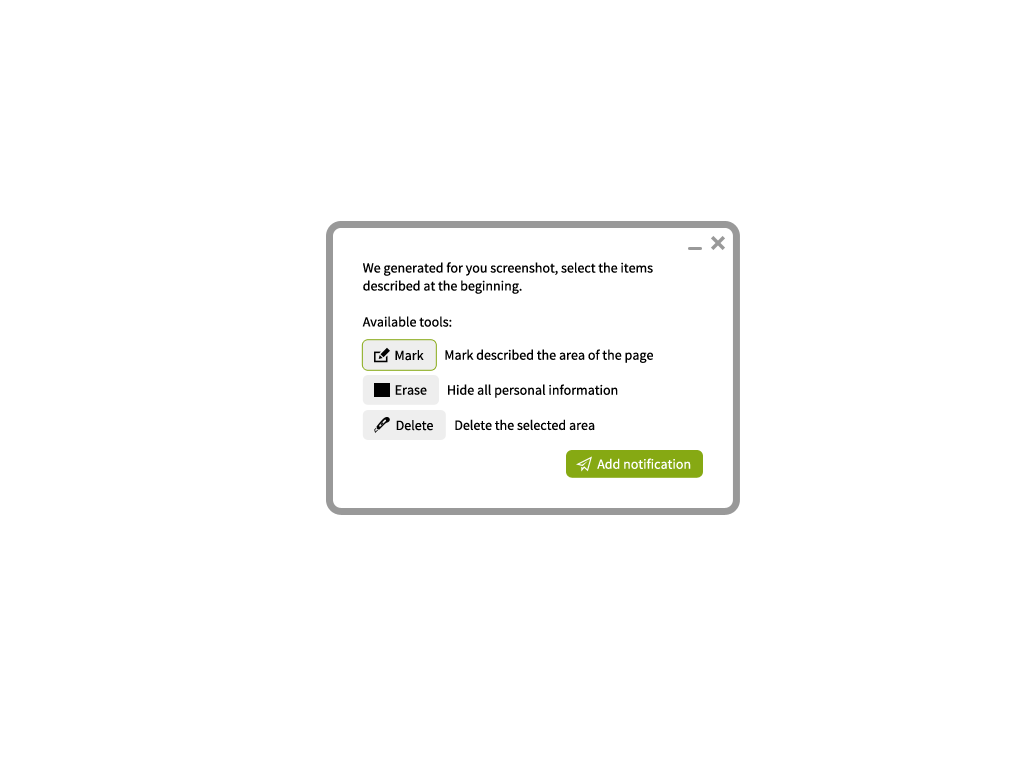
<style>
.page{position:relative;width:1024px;height:768px;background:#ffffff}
.page>*{position:absolute;margin:0}
.t1{font:14px/18px "SourceSansPro-Regular";color:#000000}
.t2{font:14px "SourceSansPro-Regular";color:#000000}
.t3{font:14px "SourceSansPro-Regular";color:#ffffff}
</style>
<div class="page">
<p class="t1" style="left:362px;top:262px;width:291px;height:65px;text-align:justify">We generated for you screenshot, select the items <br>described at the beginning.<br><br>Available tools:</p>
<p class="t2" style="left:395px;top:350px;width:29px;height:11px">Mark</p>
<p class="t2" style="left:395px;top:350px;width:29px;height:11px">Mark</p>
<p class="t2" style="left:445px;top:349px;width:208px;height:14px">Mark described the area of ​​the page</p>
<p class="t2" style="left:395px;top:385px;width:32px;height:10px">Erase</p>
<p class="t2" style="left:448px;top:384px;width:170px;height:14px">Hide all personal information</p>
<p class="t2" style="left:396px;top:420px;width:37px;height:11px">Delete</p>
<p class="t2" style="left:455px;top:419px;width:140px;height:12px">Delete the selected area</p>
<p class="t3" style="left:597px;top:458px;width:94px;height:11px">Add notification</p>
</div>
